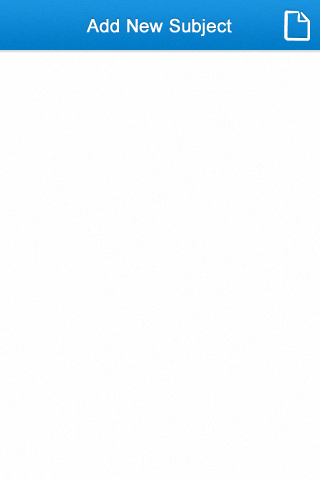
<style>
.page{position:relative;width:320px;height:480px}
.page>*{position:absolute;margin:0}
.t1{font:18px "ArialMT";letter-spacing:0.025em;color:#ffffff;font-weight:bold}
</style>
<div class="page">
<p class="t1" style="left:86px;top:18px;width:146px;height:18px">Add New Subject</p>
</div>
